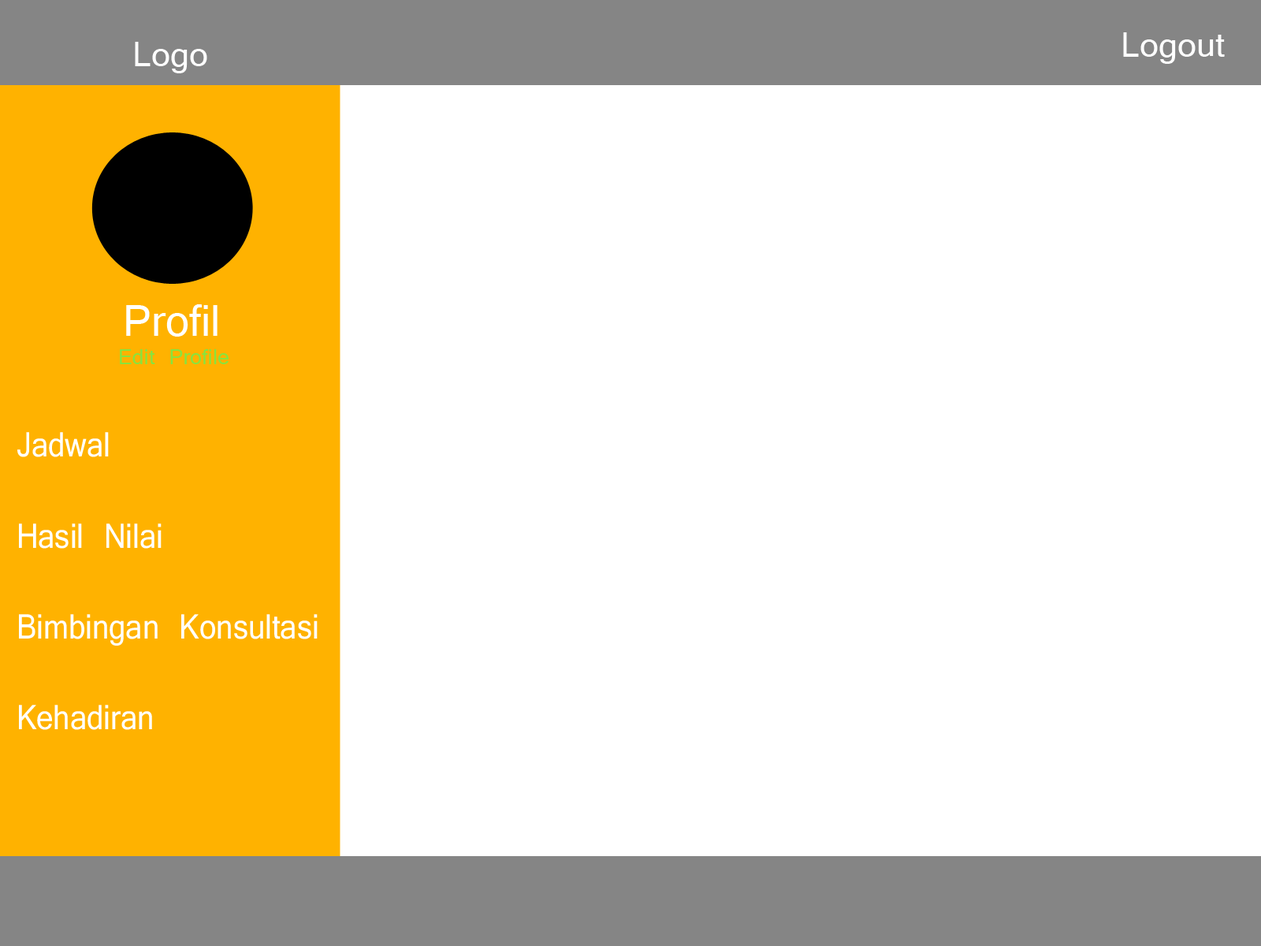
<style>
.page{position:relative;width:1261px;height:946px;background:#ffffff}
.page>*{position:absolute;margin:0}
.t1{font:37.8px "Vrinda";color:#fefefe}
.t2{font:47.3px "Vrinda";color:#ffffff}
.t3{font:23.6px "Vrinda";color:#88e33e}
.t4{font:37.8px "Vrinda";color:#ffffff;scale:0.89 1}
</style>
<div class="page">
<p class="t1" style="left:135px;top:42px;width:72px;height:31px">Logo</p>
<p class="t1" style="left:1123px;top:32px;width:102px;height:32px">Logout</p>
<p class="t2" style="left:126px;top:304px;width:92px;height:33px">Profil</p>
<p class="t3" style="left:120px;top:349px;width:109px;height:15px">Edit Profile</p>
<p class="t4" style="left:17px;top:432px;width:301px;height:298px">Jadwal<br><br>Hasil Nilai<br><br>Bimbingan Konsultasi<br><br>Kehadiran</p>
</div>
